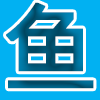
<style>
.page{position:relative;width:100px;height:100px;background:#01b1f2}
.page>*{position:absolute;margin:0}
.t1{font:96.9px "AlibabaPuHuiTiR";letter-spacing:0.1em;font-weight:bold}
</style>
<div class="page">
<p class="t1" style="left:6px;top:2px;width:88px;height:87px">鱼</p>
</div>
